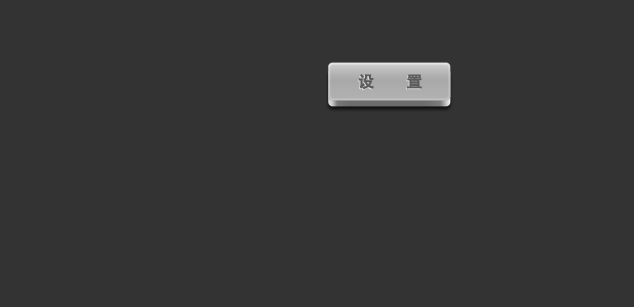
<style>
.page{position:relative;width:634px;height:307px;background:#333333}
.page>*{position:absolute;margin:0}
.t1{font:15.9px "AdobeHeitiStd-Regular";color:#5c5c5c;font-weight:bold}
</style>
<div class="page">
<p class="t1" style="left:358px;top:74px;width:64px;height:15px">设        置</p>
</div>
